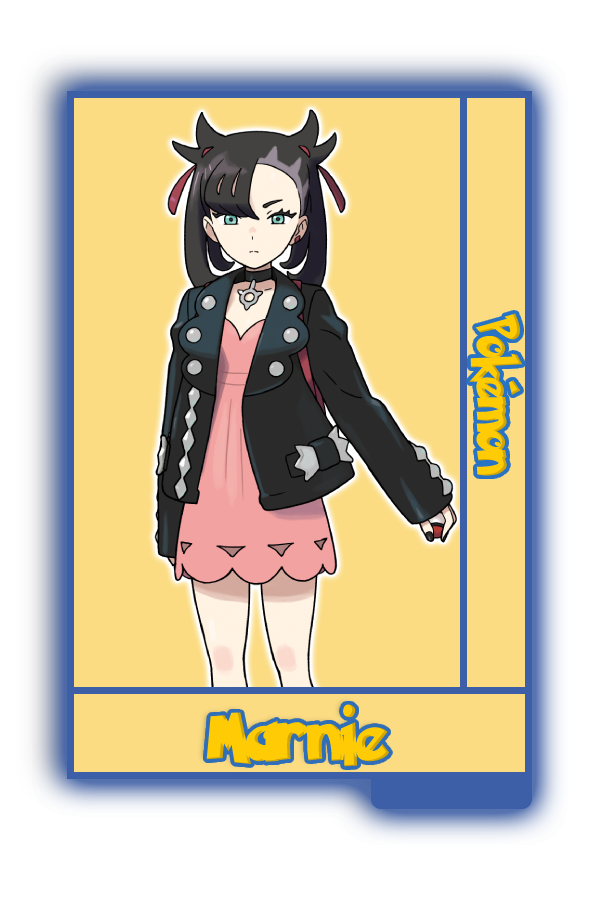
<style>
.page{position:relative;width:600px;height:900px;background:#fbdc83}
.page>*{position:absolute;margin:0}
.t1{font:48.8px "PokemonSolidNormal";color:#ffcb05;scale:0.8 1}
.t2{font:60.1px "PokemonSolidNormal";color:#ffcb05;scale:0.96 1}
</style>
<div class="page">
<p class="t1" style="left:469px;top:313px;width:54px;height:163px;rotate:90deg">Pokémon</p>
<p class="t2" style="left:206px;top:704px;width:183px;height:63px">Marnie</p>
</div>
